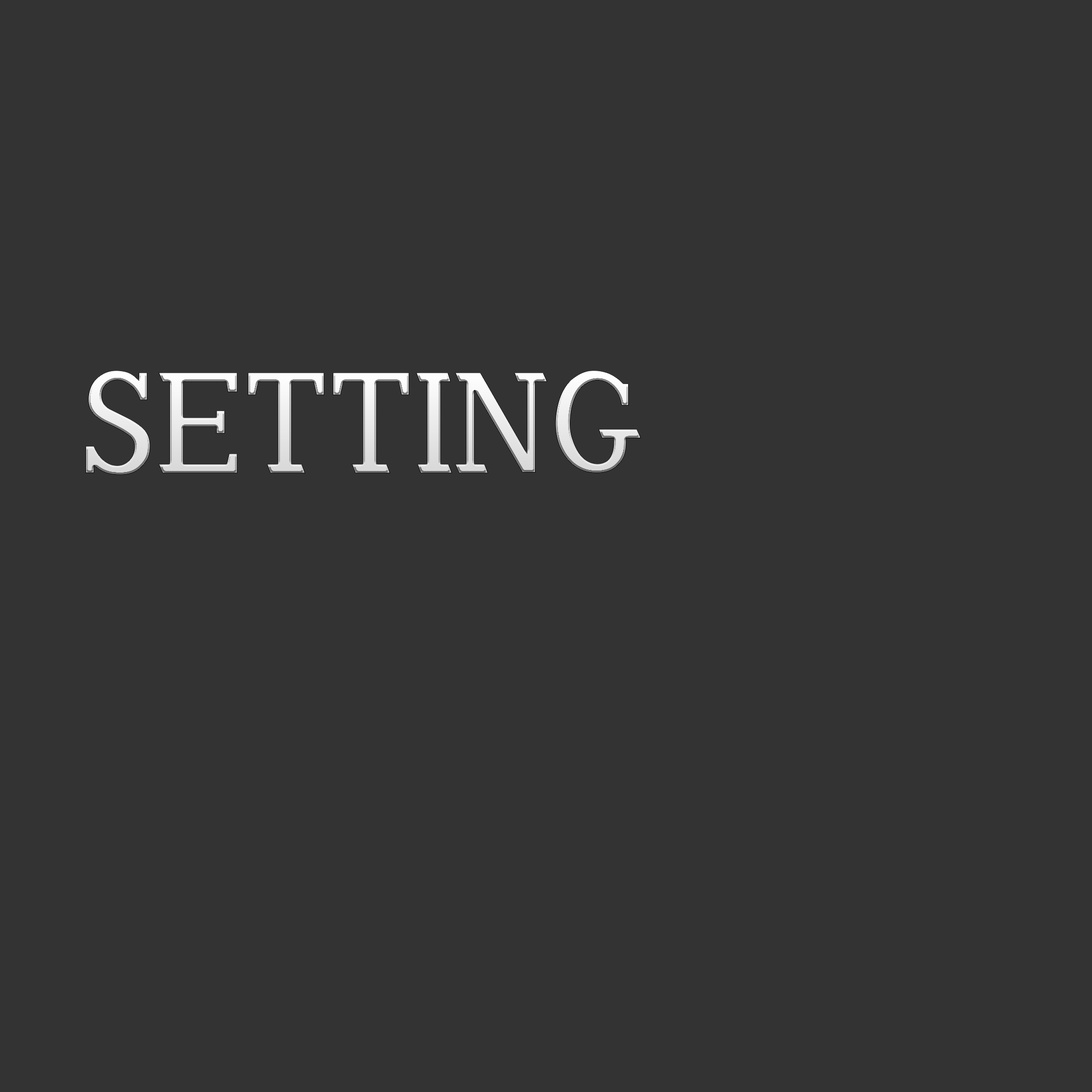
<style>
.page{position:relative;width:1092px;height:1092px;background:#333333}
.page>*{position:absolute;margin:0}
.t1{font:127.9px "HGSSoeiPresenceEB";scale:1.18 1}
</style>
<div class="page">
<p class="t1" style="left:85px;top:370px;width:556px;height:105px">SETTING</p>
</div>
